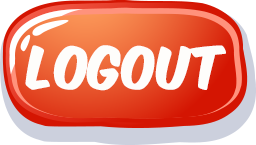
<style>
.page{position:relative;width:256px;height:145px}
.page>*{position:absolute;margin:0}
.t1{font:50px "KomikaAxis";color:#fefdfb}
</style>
<div class="page">
<p class="t1" style="left:25px;top:45px;width:201px;height:46px">logOUT</p>
</div>
